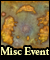
<style>
.page{position:relative;width:50px;height:60px}
.page>*{position:absolute;margin:0}
.t1{font:11px "AGaramondPro-Bold";color:#fdfcb0}
</style>
<div class="page">
<p class="t1" style="left:0px;top:47px;width:50px;height:9px">Misc Event</p>
</div>
